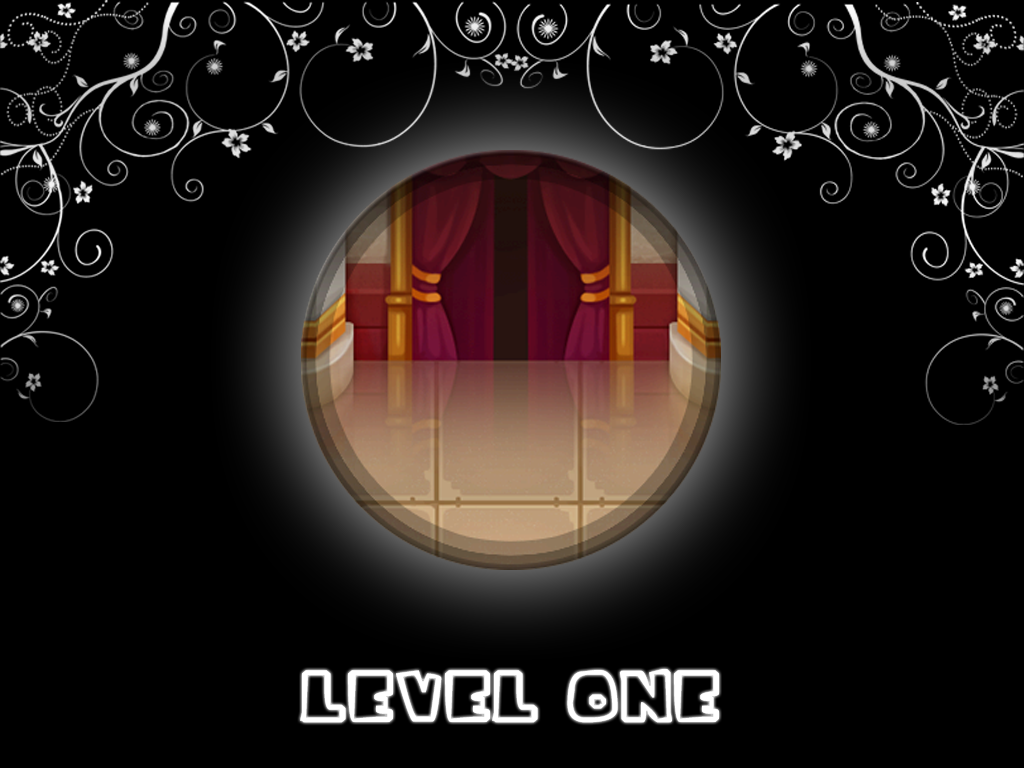
<style>
.page{position:relative;width:1024px;height:768px;background:#000000}
.page>*{position:absolute;margin:0}
.t1{font:109.1px "iceagefont";color:#ffffff;text-transform:uppercase}
</style>
<div class="page">
<p class="t1" style="left:300px;top:669px;width:419px;height:54px">Level One</p>
</div>
